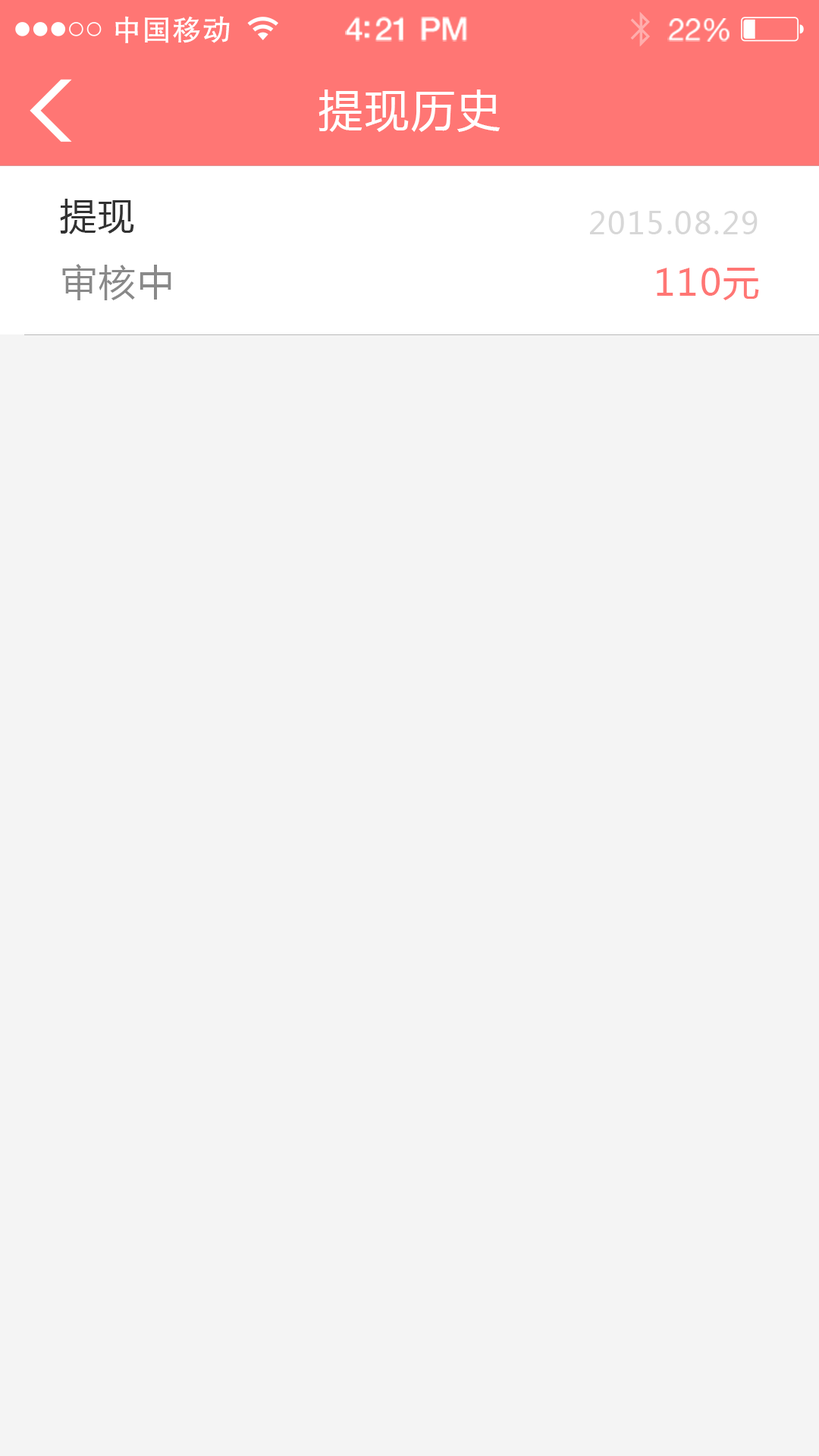
<style>
.page{position:relative;width:819px;height:1456px;background:#f4f4f4}
.page>*{position:absolute;margin:0}
.t1{font:29.4px "FZHTJW--GB1-0";letter-spacing:0.02em;color:#ffffff}
.t2{font:32px "HelveticaNeue-Medium";letter-spacing:-0.02em;color:#ffffff}
.t3{font:30.7px "HelveticaNeue";letter-spacing:-0.02em;color:#ffffff}
.t4{font:44px "MicrosoftYaHei";letter-spacing:0.05em;color:#ffffff}
.t5{font:36.4px "MicrosoftYaHei";letter-spacing:0.05em;color:#323232}
.t6{font:30.3px "MicrosoftYaHei";letter-spacing:0.05em;color:#d7d7d7}
.t7{font:36.4px "MicrosoftYaHei";letter-spacing:0.05em;color:#898989}
.t8{font:36.4px "MicrosoftYaHei";letter-spacing:0.05em;color:#ff7674}
</style>
<div class="page">
<p class="t1" style="left:115px;top:16px;width:115px;height:27px">中国移动</p>
<p class="t2" style="left:345px;top:17px;width:122px;height:25px">4:21 PM</p>
<p class="t3" style="left:667px;top:18px;width:63px;height:24px">22%</p>
<p class="t4" style="left:318px;top:89px;width:182px;height:43px">提现历史</p>
<p class="t5" style="left:60px;top:199px;width:74px;height:35px">提现</p>
<p class="t6" style="left:590px;top:211px;width:168px;height:23px">2015.08.29</p>
<p class="t7" style="left:62px;top:264px;width:109px;height:36px">审核中</p>
<p class="t8" style="left:657px;top:268px;width:102px;height:32px">110元</p>
</div>
